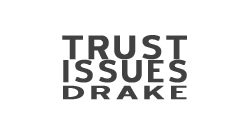
<style>
.page{position:relative;width:249px;height:140px;background:#ffffff}
.page>*{position:absolute;margin:0}
.t1{font:42px "BlueHighway";color:#424141;font-weight:bold}
.t2{font:39px "BlueHighway";letter-spacing:0.02em;color:#424141;font-weight:bold}
.t3{font:23.4px "BlueHighway";letter-spacing:0.04em;color:#424141;font-weight:bold;scale:1.67 1}
</style>
<div class="page">
<p class="t1" style="left:62px;top:35px;width:125px;height:25px">TRUST</p>
<p class="t2" style="left:63px;top:59px;width:124px;height:24px">ISSUES</p>
<p class="t3" style="left:63px;top:85px;width:124px;height:15px">DRAKE</p>
</div>
